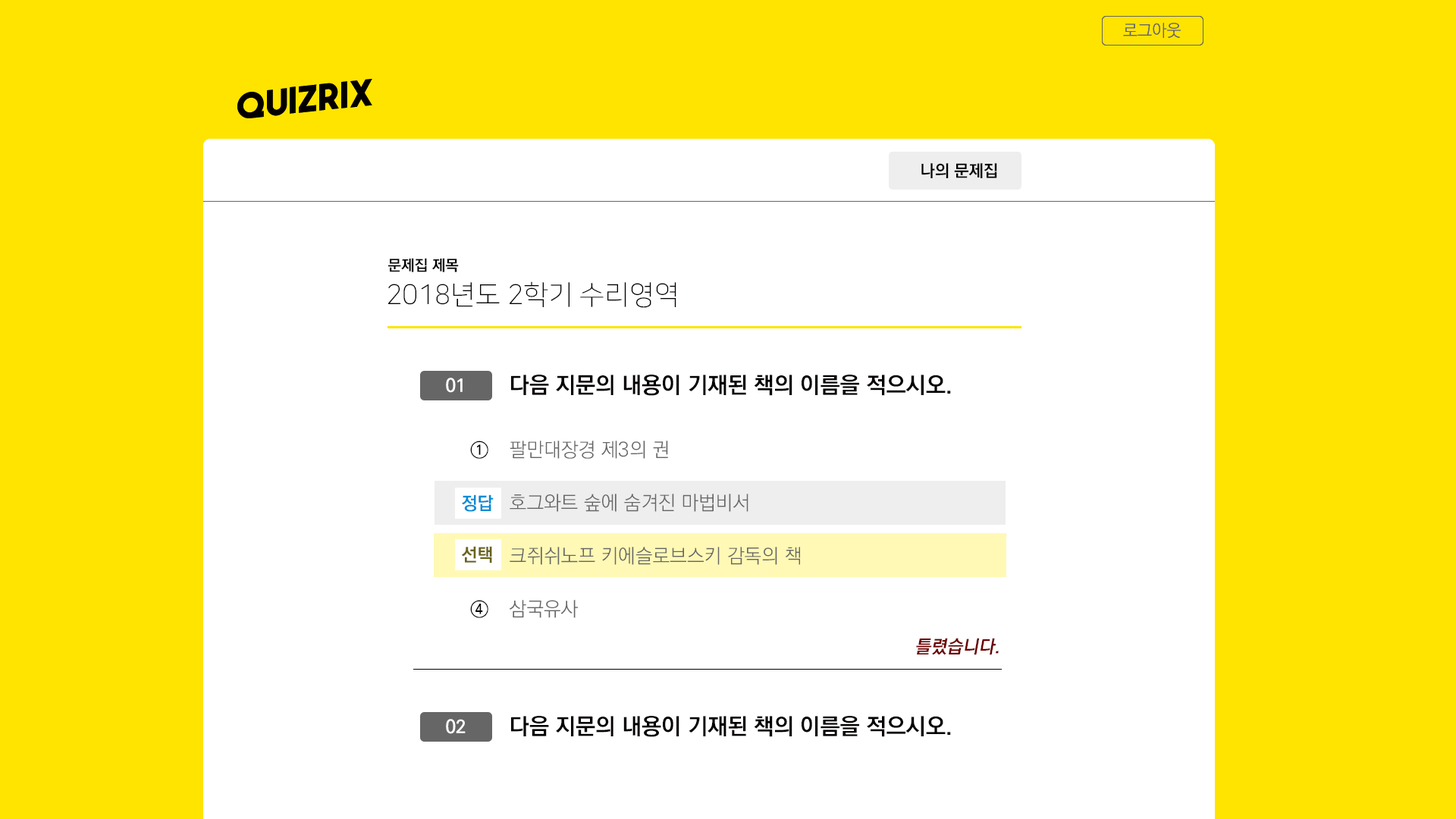
<style>
.page{position:relative;width:1456px;height:819px;background:#ffffff}
.page>*{position:absolute;margin:0}
.t1{font:16.7px "KoPubDotumLight";color:#666666}
.t2{font:35.8px "TheNextFont";color:#040000}
.t3{font:16.7px "KoPubDotumBold";color:#040000}
.t4{font:15.2px "KoPubDotumBold";color:#040000}
.t5{font:27.3px "NanumSquareL";color:#040000}
.t6{font:18.2px "KoPubDotumBold";color:#ffffff}
.t7{font:22.7px "KoPubDotumBold";color:#040000}
.t8{font:19.7px "KoPubDotumBold";color:#040000}
.t9{font:19.7px "KoPubDotumLight";color:#666666}
.t10{font:18.2px "KoPubDotumBold";color:#008cd5}
.t11{font:18.2px "KoPubDotumBold";color:#69631c}
.t12{font:18.2px "KoPubDotumBold";color:#6c0000;font-style:italic}
</style>
<div class="page">
<p class="t1" style="left:1123px;top:23px;width:58px;height:15px">로그아웃</p>
<p class="t1" style="left:1123px;top:23px;width:58px;height:15px">로그아웃</p>
<p class="t2" style="left:237px;top:79px;width:135px;height:39px;rotate:-6deg">QuizriX</p>
<p class="t2" style="left:237px;top:79px;width:135px;height:39px;rotate:-6deg">QuizriX</p>
<p class="t3" style="left:921px;top:163px;width:76px;height:15px">나의 문제집</p>
<p class="t3" style="left:921px;top:163px;width:76px;height:15px">나의 문제집</p>
<p class="t4" style="left:388px;top:258px;width:71px;height:14px">문제집 제목</p>
<p class="t5" style="left:388px;top:281px;width:288px;height:27px">2018년도 2학기 수리영역</p>
<p class="t6" style="left:446px;top:378px;width:17px;height:15px">01</p>
<p class="t7" style="left:511px;top:375px;width:440px;height:21px">다음 지문의 내용이 기재된 책의 이름을 적으시오.</p>
<p class="t8" style="left:470px;top:441px;width:18px;height:18px">①</p>
<p class="t9" style="left:510px;top:441px;width:158px;height:18px">팔만대장경 제3의 권</p>
<p class="t10" style="left:462px;top:494px;width:32px;height:18px">정답</p>
<p class="t9" style="left:510px;top:494px;width:238px;height:18px">호그와트 숲에 숨겨진 마법비서</p>
<p class="t11" style="left:461px;top:546px;width:31px;height:17px">선택</p>
<p class="t9" style="left:510px;top:547px;width:290px;height:18px">크쥐쉬노프 키에슬로브스키 감독의 책</p>
<p class="t8" style="left:470px;top:600px;width:18px;height:18px">④</p>
<p class="t9" style="left:509px;top:600px;width:69px;height:18px">삼국유사</p>
<p class="t12" style="left:916px;top:638px;width:83px;height:17px">틀렸습니다.</p>
<p class="t6" style="left:446px;top:719px;width:20px;height:15px">02</p>
<p class="t7" style="left:511px;top:716px;width:440px;height:21px">다음 지문의 내용이 기재된 책의 이름을 적으시오.</p>
</div>
